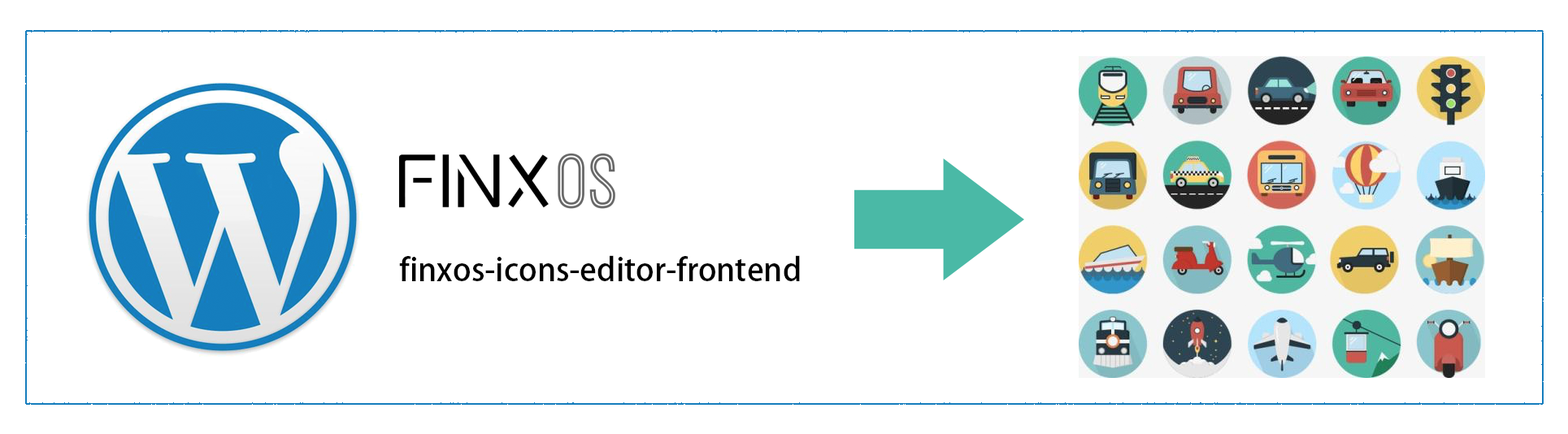
<style>
.page{position:relative;width:1568px;height:434px;background:#ffffff}
.page>*{position:absolute;margin:0}
.t1{font:31.2px "AdobeHeitiStd-Regular";color:#000000}
</style>
<div class="page">
<p class="t1" style="left:399px;top:255px;width:401px;height:26px">finxos-icons-editor-frontend</p>
</div>
